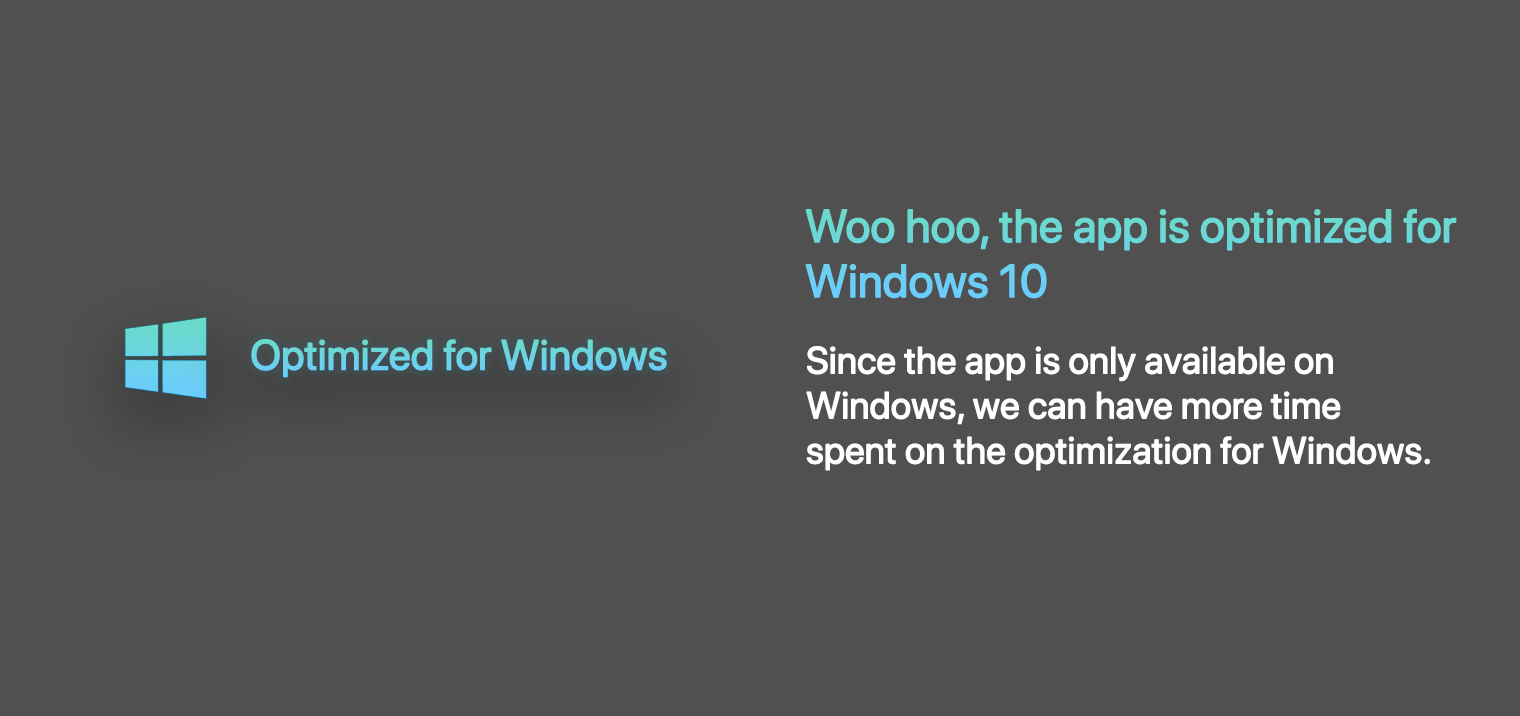
<style>
.page{position:relative;width:1520px;height:716px;background:#505050}
.page>*{position:absolute;margin:0}
.t1{font:45.8px "SFProDisplay-Regular";color:#6bd7d6;font-weight:bold}
.t2{font:41.7px "SFProDisplay-Regular";color:#6bd4e3;font-weight:bold}
.t3{font:37.5px "SFProDisplay-Regular";color:#ffffff;font-weight:bold}
</style>
<div class="page">
<p class="t1" style="left:805px;top:208px;width:652px;height:91px">Woo hoo, the app is optimized for<br>Windows 10</p>
<p class="t2" style="left:251px;top:339px;width:416px;height:39px">Optimized for Windows</p>
<p class="t3" style="left:806px;top:346px;width:624px;height:125px">Since the app is only available on<br>Windows, we can have more time<br>spent on the optimization for Windows.</p>
</div>
